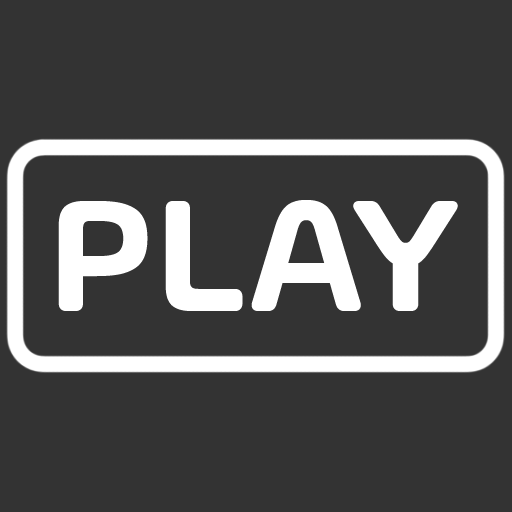
<style>
.page{position:relative;width:512px;height:512px;background:#333333}
.page>*{position:absolute;margin:0}
.t1{font:170px "Arlon-SemiBold";color:#ffffff}
</style>
<div class="page">
<p class="t1" style="left:58px;top:200px;width:400px;height:111px">PLAY</p>
</div>
